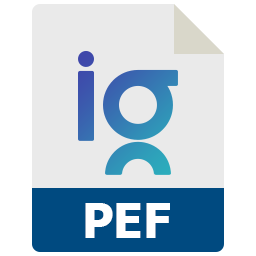
<style>
.page{position:relative;width:256px;height:256px;background:#eaeaea}
.page>*{position:absolute;margin:0}
.t1{font:48px "Tahoma-Bold";color:#ffffff}
</style>
<div class="page">
<p class="t1" style="left:85px;top:203px;width:85px;height:35px">PEF</p>
</div>
